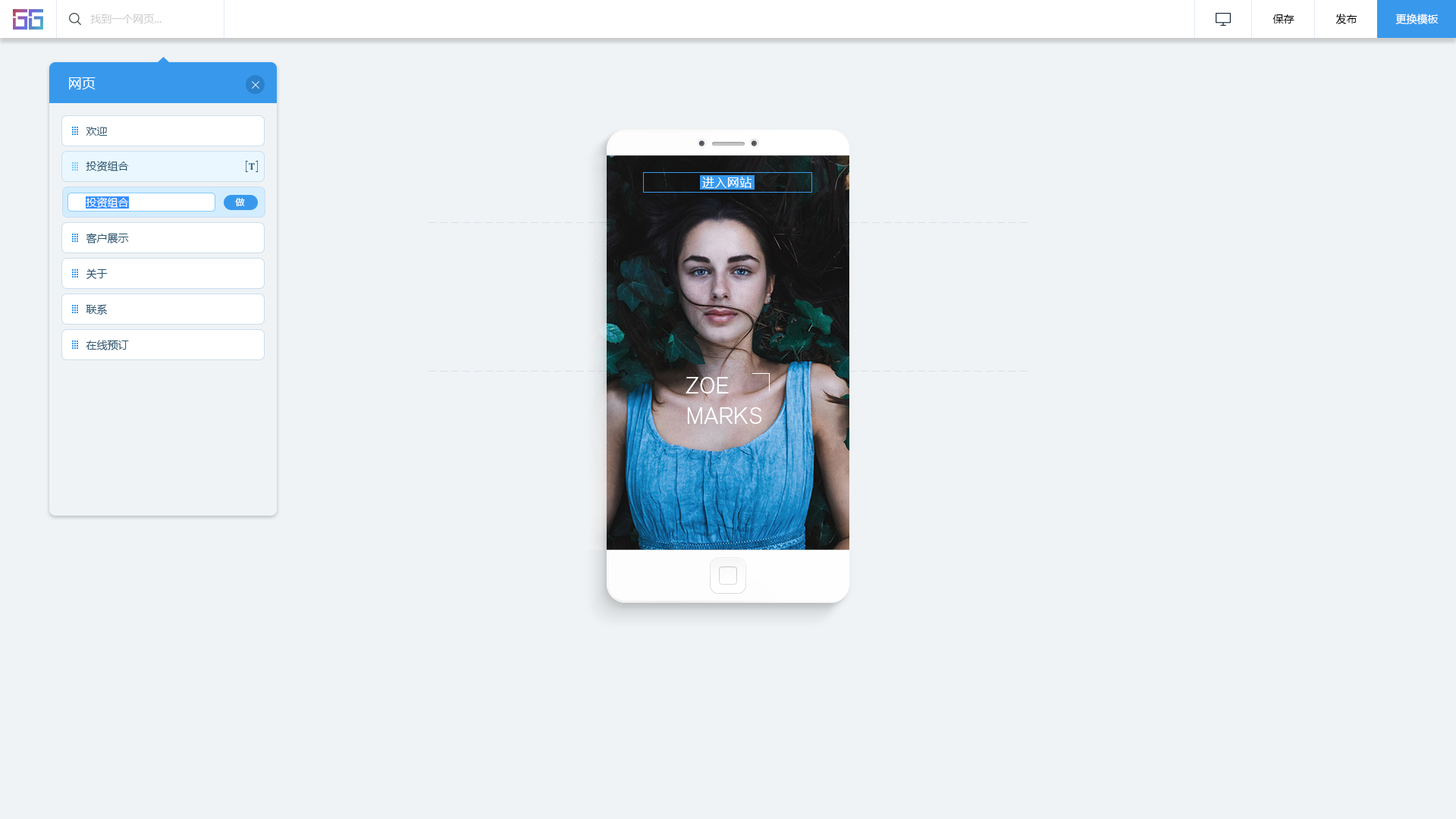
<style>
.page{position:relative;width:1456px;height:819px;background:#f0f3f5}
.page>*{position:absolute;margin:0}
.t1{font:10.6px "MicrosoftYaHei";color:#cccccc}
.t2{font:10.6px "MicrosoftYaHei";color:#000000}
.t3{font:10.6px "MicrosoftYaHei";color:#ffffff}
.t4{font:13.6px "MicrosoftYaHei";color:#ffffff}
.t5{font:10.6px "MicrosoftYaHei";color:#2b5672}
.t6{font:12.1px "MicrosoftYaHei";letter-spacing:0.025em;color:#ffffff}
.t7{font:9.1px "MicrosoftYaHei";color:#ffffff}
.t8{font:22.7px/30.3px "AkzidenzGroteskBQ-LightSC";color:#ffffff}
</style>
<div class="page">
<p class="t1" style="left:90px;top:14px;width:72px;height:10px">找到一个网页...</p>
<p class="t2" style="left:1272px;top:14px;width:22px;height:10px">保存</p>
<p class="t2" style="left:1335px;top:14px;width:22px;height:10px">发布</p>
<p class="t3" style="left:1395px;top:14px;width:44px;height:10px">更换模板</p>
<p class="t4" style="left:69px;top:77px;width:27px;height:12px">网页</p>
<p class="t5" style="left:86px;top:127px;width:22px;height:9px">欢迎</p>
<p class="t5" style="left:86px;top:161px;width:43px;height:10px">投资组合</p>
<p class="t6" style="left:702px;top:177px;width:50px;height:11px">进入网站</p>
<p class="t3" style="left:86px;top:197px;width:43px;height:11px">投资组合</p>
<p class="t7" style="left:235px;top:198px;width:10px;height:8px">做</p>
<p class="t5" style="left:86px;top:233px;width:43px;height:10px">客户展示</p>
<p class="t5" style="left:86px;top:268px;width:22px;height:11px">关于</p>
<p class="t5" style="left:86px;top:304px;width:21px;height:11px">联系</p>
<p class="t5" style="left:86px;top:340px;width:43px;height:10px">在线预订</p>
<p class="t8" style="left:686px;top:377px;width:76px;height:47px">ZOE<br>MARKS</p>
</div>
